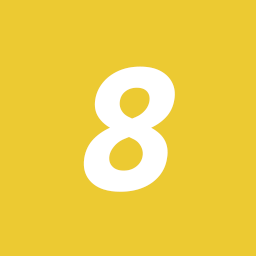
<style>
.page{position:relative;width:256px;height:256px;background:#ecca32}
.page>*{position:absolute;margin:0}
.t1{font:166.7px "JetBrainsMono-ExtraBoldItalic";color:#ffffff}
</style>
<div class="page">
<p class="t1" style="left:83px;top:66px;width:92px;height:126px">8</p>
</div>
